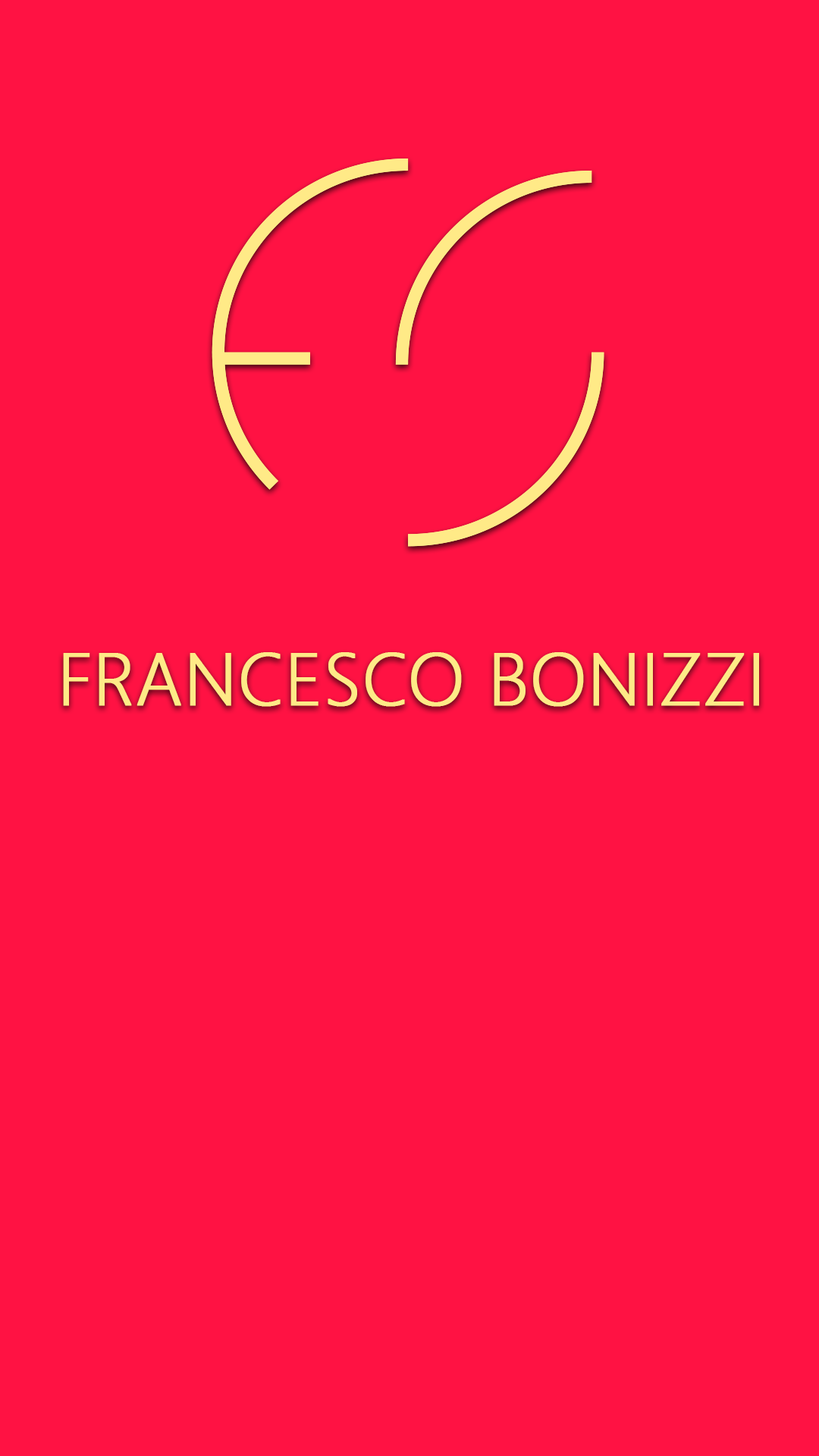
<style>
.page{position:relative;width:819px;height:1456px;background:#ff1243}
.page>*{position:absolute;margin:0}
.t1{font:73.2px "SegoeUI-Light";color:#ffea87;font-weight:bold}
</style>
<div class="page">
<p class="t1" style="left:63px;top:652px;width:696px;height:55px">FRANCESCO BONIZZI</p>
</div>
